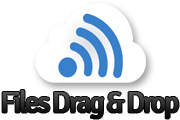
<style>
.page{position:relative;width:180px;height:120px;background:#ffffff}
.page>*{position:absolute;margin:0}
.t1{font:28.7px "Signika-Regular";letter-spacing:-0.1em;font-weight:bold}
</style>
<div class="page">
<p class="t1" style="left:2px;top:90px;width:177px;height:29px">Files Drag &amp; Drop</p>
</div>
